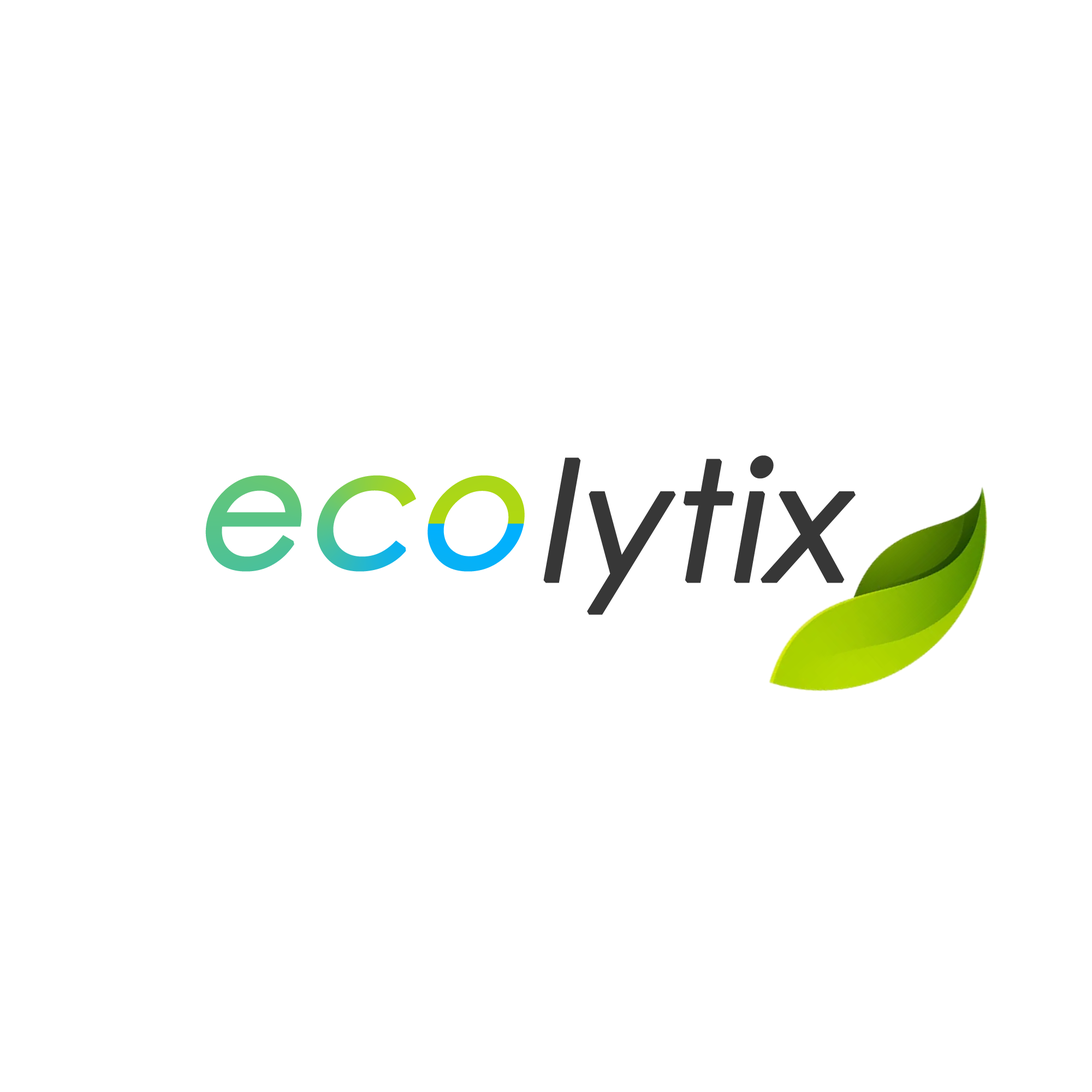
<style>
.page{position:relative;width:1092px;height:1092px;background:#ffffff}
.page>*{position:absolute;margin:0}
.t1{font:163.8px "CenturyGothic";color:#373737;font-weight:bold;font-style:italic}
.t2{font:163.8px "CenturyGothic";font-weight:bold;font-style:italic}
</style>
<div class="page">
<p class="t1" style="left:543px;top:455px;width:313px;height:160px">lytix</p>
<p class="t2" style="left:205px;top:475px;width:320px;height:97px">eco</p>
</div>
